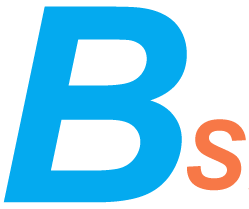
<style>
.page{position:relative;width:249px;height:209px;background:#ffffff}
.page>*{position:absolute;margin:0}
.t1{font:273.1px "Arial-BoldItalicMT";color:#04aaef}
</style>
<div class="page">
<p class="t1" style="left:3px;top:6px;width:184px;height:197px">B</p>
</div>
